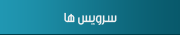
<style>
.page{position:relative;width:180px;height:35px}
.page>*{position:absolute;margin:0}
.t1{font:14px "Mj_Flow";letter-spacing:-0.001em;color:#f1f2f2}
</style>
<div class="page">
<p class="t1" style="left:64px;top:12px;width:53px;height:13px">سرویس ها</p>
</div>
